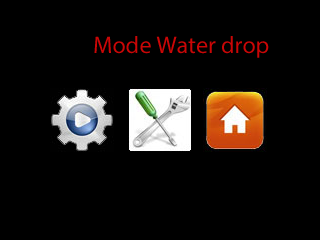
<style>
.page{position:relative;width:320px;height:240px;background:#000000}
.page>*{position:absolute;margin:0}
.t1{font:24px "MyriadPro-Regular";color:#ca0606}
</style>
<div class="page">
<p class="t1" style="left:94px;top:36px;width:175px;height:22px">Mode Water drop</p>
</div>
